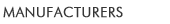
<style>
.page{position:relative;width:170px;height:24px;background:#ffffff}
.page>*{position:absolute;margin:0}
.t1{font:14px "FuturaBT-Light";letter-spacing:0.025em;color:#363636;text-transform:uppercase;font-weight:bold}
</style>
<div class="page">
<p class="t1" style="left:3px;top:6px;width:120px;height:12px">manufacturers</p>
</div>
